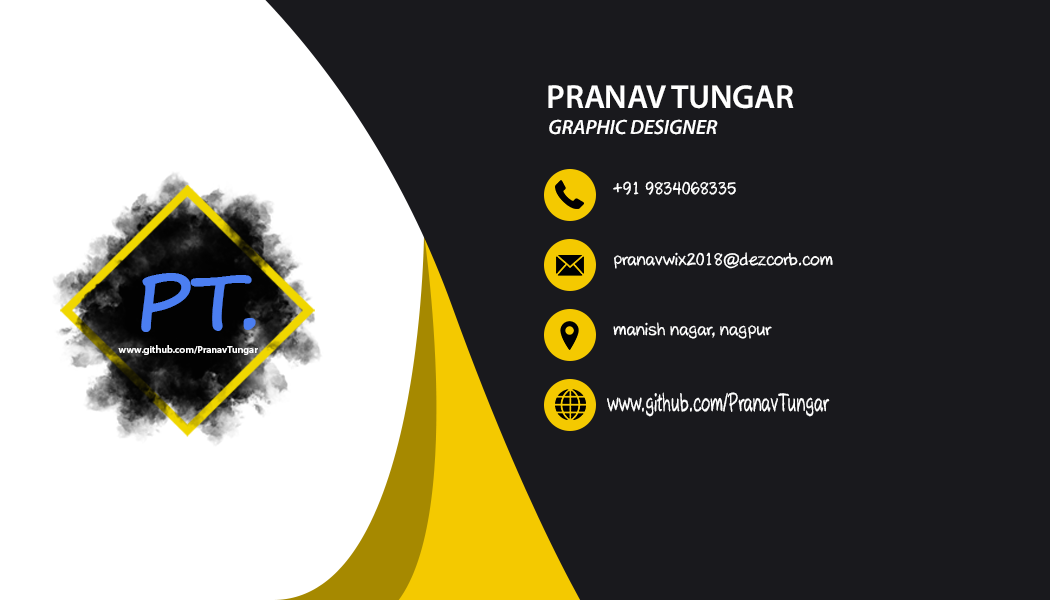
<style>
.page{position:relative;width:1050px;height:600px;background:#19191d}
.page>*{position:absolute;margin:0}
.t1{font:33.3px "MyriadPro-Semibold";letter-spacing:-0.01em;color:#ffffff}
.t2{font:20.8px "MyriadPro-SemiboldIt";letter-spacing:-0.01em;color:#ffffff}
.t3{font:16.7px "AxureHandwriting";letter-spacing:-0.01em;color:#ffffff}
.t4{font:78.6px "SegoePrint-Bold";color:#4b7ef1}
.t5{font:10px "MyriadPro-Semibold";color:#fefefe}
.t6{font:24.8px "AxureHandwriting";color:#fefefe;scale:0.64 1}
</style>
<div class="page">
<p class="t1" style="left:548px;top:85px;width:246px;height:24px">PRANAV TUNGAR</p>
<p class="t2" style="left:549px;top:119px;width:169px;height:16px">GRAPHIC DESIGNER</p>
<p class="t3" style="left:613px;top:181px;width:123px;height:14px">+91 9834068335</p>
<p class="t3" style="left:614px;top:252px;width:219px;height:17px">pranavwix2018@dezcorb.com</p>
<p class="t4" style="left:141px;top:273px;width:115px;height:59px">PT.</p>
<p class="t3" style="left:613px;top:322px;width:159px;height:17px">manish nagar, nagpur</p>
<p class="t5" style="left:118px;top:345px;width:140px;height:10px">www.github.com/PranavTungar</p>
<p class="t6" style="left:607px;top:392px;width:223px;height:25px">www.github.com/PranavTungar</p>
</div>
